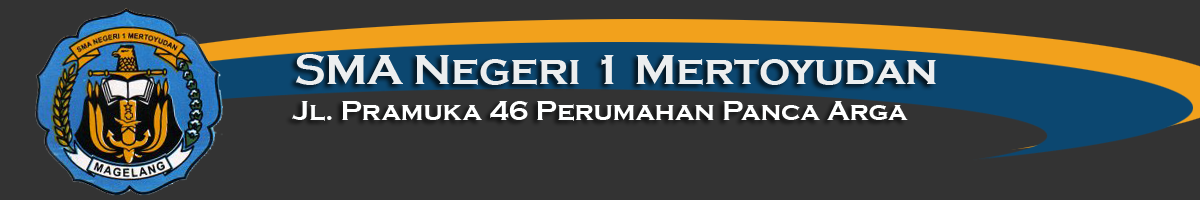
<style>
.page{position:relative;width:1200px;height:200px;background:#333333}
.page>*{position:absolute;margin:0}
.t1{font:43.6px "CopperplateGothic-Bold";color:#eceeef}
.t2{font:27.8px "CopperplateGothic-Bold";color:#fdfefe}
</style>
<div class="page">
<p class="t1" style="left:295px;top:54px;width:641px;height:31px">SMA Negeri 1 Mertoyudan</p>
<p class="t2" style="left:292px;top:101px;width:616px;height:20px">Jl. Pramuka 46 Perumahan Panca Arga</p>
</div>
